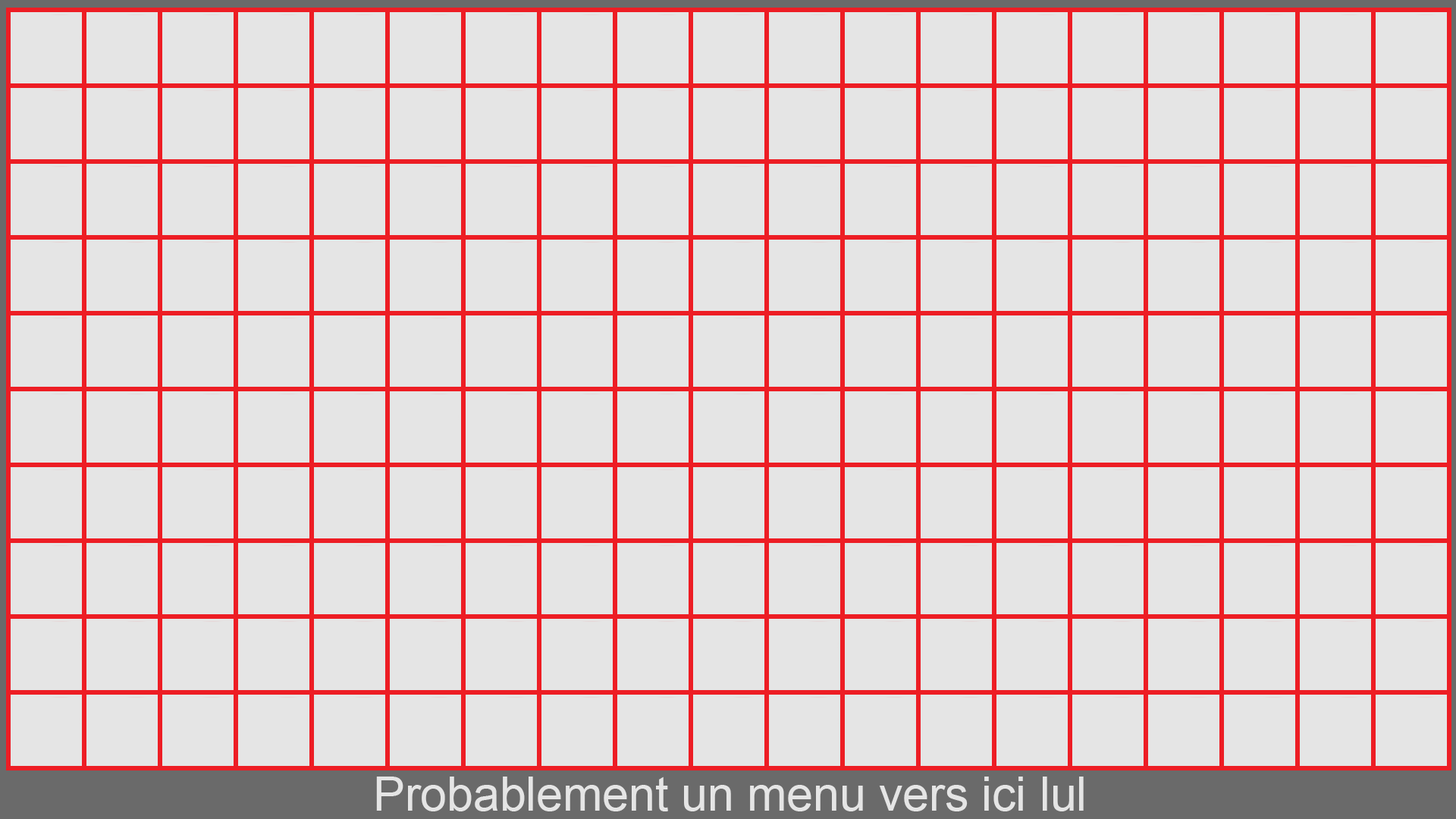
<style>
.page{position:relative;width:1456px;height:819px;background:#e5e5e5}
.page>*{position:absolute;margin:0}
.t1{font:47.4px "ArialMT";color:#e5e5e5}
</style>
<div class="page">
<p class="t1" style="left:376px;top:777px;width:708px;height:34px">Probablement un menu vers ici lul</p>
</div>
